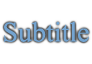
<style>
.page{position:relative;width:92px;height:64px;background:#ffffff}
.page>*{position:absolute;margin:0}
.t1{font:28px "TimesNewRomanPSMT";color:#73a4d1}
</style>
<div class="page">
<p class="t1" style="left:4px;top:21px;width:85px;height:21px">Subtitle</p>
</div>
